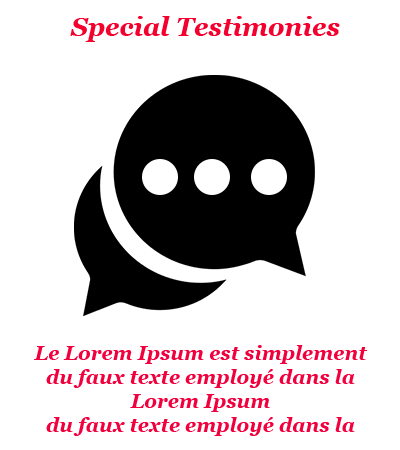
<style>
.page{position:relative;width:400px;height:450px;background:#ffffff}
.page>*{position:absolute;margin:0}
.t1{font:26px "Georgia-BoldItalic";color:#f4002e}
.t2{font:20px "Georgia-BoldItalic";color:#f1003e}
</style>
<div class="page">
<p class="t1" style="left:70px;top:16px;width:270px;height:26px">Special Testimonies</p>
<p class="t2" style="left:34px;top:345px;width:334px;height:91px;text-align:center">Le Lorem Ipsum est simplement du faux texte employé dans la Lorem Ipsum <br>du faux texte employé dans la</p>
</div>
